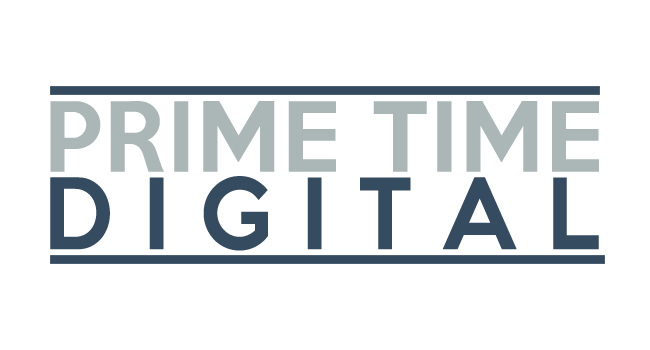
<style>
.page{position:relative;width:650px;height:350px;background:#ffffff}
.page>*{position:absolute;margin:0}
.t1{font:87.6px "KeepCalm-Medium";color:#abb7b7;font-weight:bold}
.t2{font:88.9px "KeepCalm-Medium";color:#354b60;font-weight:bold;scale:0.94 1}
</style>
<div class="page">
<p class="t1" style="left:50px;top:101px;width:549px;height:71px">PRIME TIME</p>
<p class="t2" style="left:50px;top:176px;width:549px;height:75px">D I G I T A L</p>
</div>
